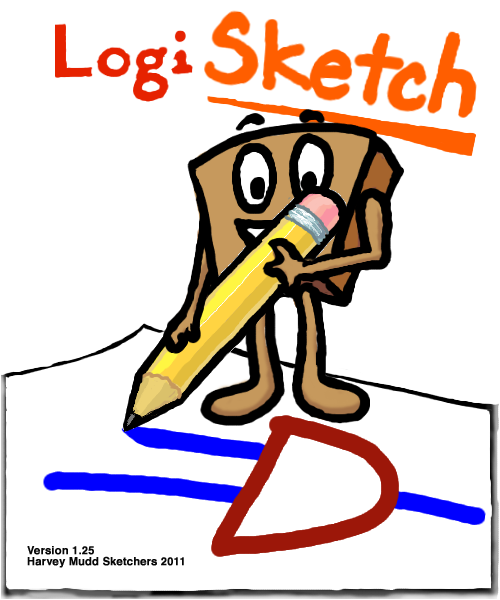
<style>
.page{position:relative;width:500px;height:600px;background:#ffffff}
.page>*{position:absolute;margin:0}
.t1{font:11px/11px "Helvetica-Bold";color:#070707;font-weight:bold}
</style>
<div class="page">
<p class="t1" style="left:27px;top:546px;width:157px;height:22px">Version 1.25<br>Harvey Mudd Sketchers 2011</p>
</div>
